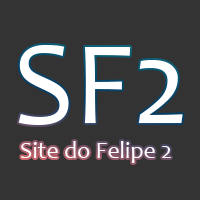
<style>
.page{position:relative;width:200px;height:200px;background:#333333}
.page>*{position:absolute;margin:0}
.t1{font:120px "Candara";color:#ffffff}
.t2{font:24px "Candara";color:#ffffff}
</style>
<div class="page">
<p class="t1" style="left:18px;top:45px;width:165px;height:80px">SF2</p>
<p class="t2" style="left:21px;top:141px;width:150px;height:22px">Site do Felipe 2</p>
</div>
